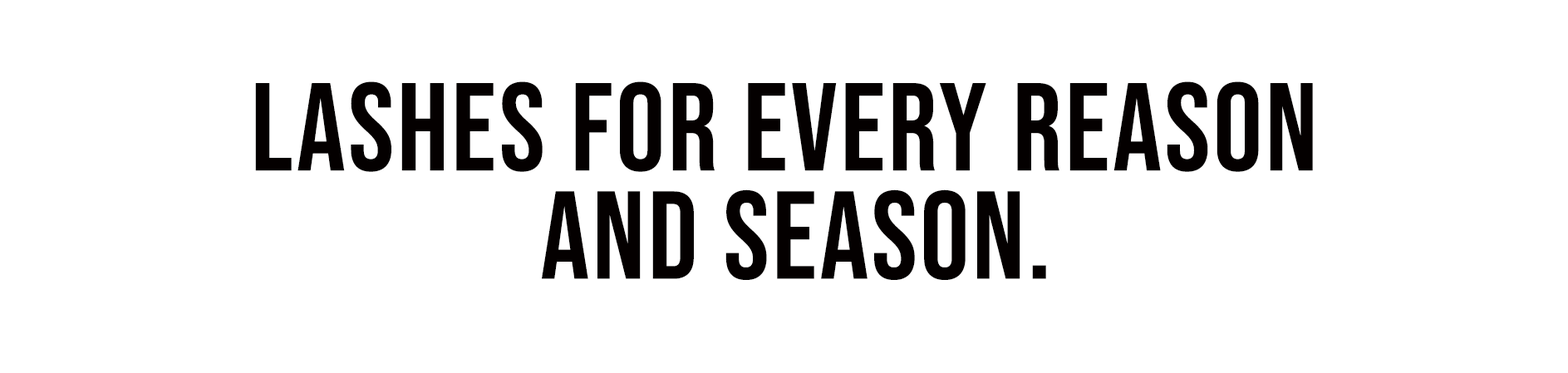
<style>
.page{position:relative;width:1568px;height:373px;background:#ffffff}
.page>*{position:absolute;margin:0}
.t1{font:124.6px/5.2px "BebasNeue-Regular";letter-spacing:0.025em;color:#040000;text-transform:uppercase}
</style>
<div class="page">
<p class="t1" style="left:255px;top:81px;width:1058px;height:199px;text-align:center">Lashes for every reason <br><br><br><br><br><br><br><br><br><br><br><br><br><br><br><br><br><br><br><br><br>and season.</p>
</div>
